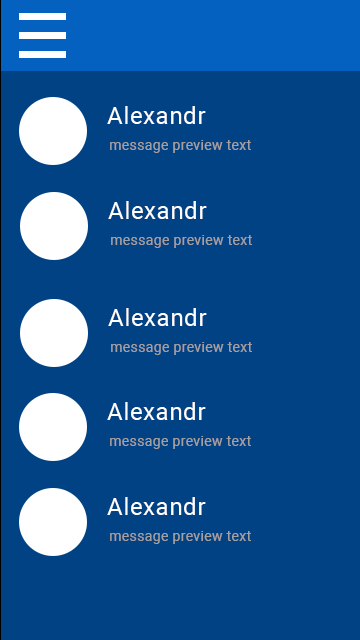
<style>
.page{position:relative;width:360px;height:640px;background:#014284}
.page>*{position:absolute;margin:0}
.t1{font:24px "Roboto-Regular";letter-spacing:0.025em;color:#ffffff}
.t2{font:14px "Roboto-Regular";letter-spacing:0.025em;color:#a5a0a0}
</style>
<div class="page">
<p class="t1" style="left:107px;top:106px;width:99px;height:18px">Alexandr</p>
<p class="t2" style="left:110px;top:140px;width:141px;height:13px">message preview text</p>
<p class="t1" style="left:108px;top:201px;width:99px;height:18px">Alexandr</p>
<p class="t2" style="left:111px;top:235px;width:141px;height:13px">message preview text</p>
<p class="t1" style="left:108px;top:308px;width:99px;height:18px">Alexandr</p>
<p class="t2" style="left:111px;top:342px;width:141px;height:13px">message preview text</p>
<p class="t1" style="left:107px;top:402px;width:99px;height:18px">Alexandr</p>
<p class="t2" style="left:110px;top:436px;width:141px;height:13px">message preview text</p>
<p class="t1" style="left:107px;top:497px;width:99px;height:18px">Alexandr</p>
<p class="t2" style="left:110px;top:531px;width:141px;height:13px">message preview text</p>
</div>
